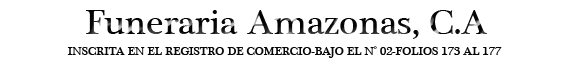
<style>
.page{position:relative;width:576px;height:63px;background:#ffffff}
.page>*{position:absolute;margin:0}
.t1{font:36px "PlantagenetCherokee";color:#070505}
.t2{font:12px "PlantagenetCherokee";color:#070505}
</style>
<div class="page">
<p class="t1" style="left:85px;top:10px;width:402px;height:29px">Funeraria Amazonas, C.A</p>
<p class="t2" style="left:67px;top:46px;width:435px;height:12px">INSCRITA EN EL REGISTRO DE COMERCIO-BAJO EL N° 02-FOLIOS 173 AL 177</p>
</div>
